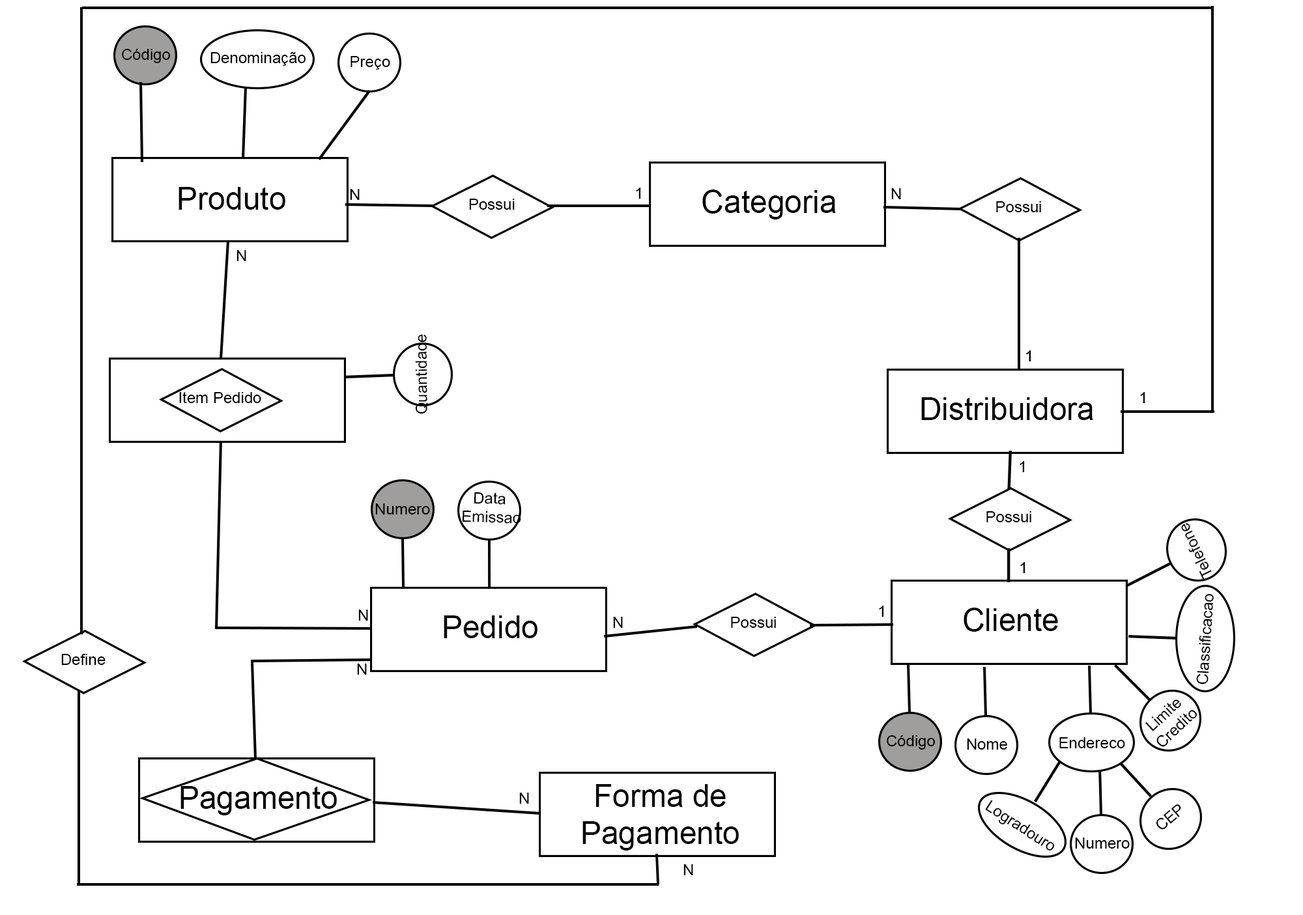
<style>
.page{position:relative;width:1303px;height:915px;background:#ffffff}
.page>*{position:absolute;margin:0}
.t1{font:15.6px "ArialMT";color:#000000}
.t2{font:31.3px "ArialMT";color:#000000}
</style>
<div class="page">
<p class="t1" style="left:122px;top:49px;width:49px;height:14px">Código</p>
<p class="t1" style="left:210px;top:52px;width:96px;height:14px">Denominação</p>
<p class="t1" style="left:350px;top:56px;width:40px;height:14px">Preço</p>
<p class="t2" style="left:178px;top:187px;width:107px;height:23px">Produto</p>
<p class="t1" style="left:350px;top:189px;width:10px;height:11px">N</p>
<p class="t1" style="left:636px;top:188px;width:5px;height:11px">1</p>
<p class="t2" style="left:702px;top:190px;width:134px;height:30px">Categoria</p>
<p class="t1" style="left:891px;top:188px;width:10px;height:11px">N</p>
<p class="t1" style="left:469px;top:199px;width:46px;height:11px">Possui</p>
<p class="t1" style="left:996px;top:201px;width:45px;height:11px">Possui</p>
<p class="t1" style="left:236px;top:250px;width:10px;height:11px">N</p>
<p class="t1" style="left:415px;top:334px;width:13px;height:80px;rotate:-91deg">Quantidade</p>
<p class="t1" style="left:1026px;top:350px;width:5px;height:12px">1</p>
<p class="t1" style="left:1026px;top:350px;width:5px;height:12px">1</p>
<p class="t1" style="left:179px;top:392px;width:82px;height:11px">Item Pedido</p>
<p class="t2" style="left:921px;top:397px;width:172px;height:23px">Distribuidora</p>
<p class="t1" style="left:1140px;top:392px;width:5px;height:11px">1</p>
<p class="t1" style="left:1019px;top:461px;width:6px;height:11px">1</p>
<p class="t1" style="left:462px;top:492px;width:59px;height:32px;text-align:center;rotate:1deg">Data <br>Emissao</p>
<p class="t1" style="left:375px;top:504px;width:55px;height:11px">Numero</p>
<p class="t1" style="left:986px;top:511px;width:45px;height:11px">Possui</p>
<p class="t1" style="left:1181px;top:523px;width:31px;height:57px;rotate:-116deg">Telefone</p>
<p class="t1" style="left:1020px;top:562px;width:5px;height:11px">1</p>
<p class="t1" style="left:1196px;top:593px;width:18px;height:92px;rotate:-86deg">Classificacao</p>
<p class="t1" style="left:879px;top:606px;width:5px;height:11px">1</p>
<p class="t1" style="left:358px;top:610px;width:10px;height:11px">N</p>
<p class="t2" style="left:444px;top:616px;width:93px;height:22px">Pedido</p>
<p class="t1" style="left:613px;top:617px;width:10px;height:11px">N</p>
<p class="t1" style="left:731px;top:617px;width:45px;height:11px">Possui</p>
<p class="t2" style="left:963px;top:608px;width:95px;height:24px">Cliente</p>
<p class="t1" style="left:61px;top:654px;width:45px;height:11px">Define</p>
<p class="t1" style="left:357px;top:664px;width:10px;height:11px">N</p>
<p class="t1" style="left:1145px;top:700px;width:52px;height:47px;text-align:center;rotate:-43deg">Limite<br>Credito</p>
<p class="t1" style="left:887px;top:735px;width:48px;height:15px">Código</p>
<p class="t1" style="left:1059px;top:737px;width:66px;height:11px">Endereco</p>
<p class="t1" style="left:967px;top:739px;width:40px;height:11px">Nome</p>
<p class="t2" style="left:582px;top:784px;width:157px;height:67px;text-align:center">Forma de Pagamento</p>
<p class="t2" style="left:180px;top:786px;width:157px;height:30px">Pagamento</p>
<p class="t1" style="left:519px;top:793px;width:10px;height:11px">N</p>
<p class="t1" style="left:985px;top:800px;width:70px;height:51px;rotate:33deg">Logradouro</p>
<p class="t1" style="left:1156px;top:805px;width:25px;height:25px;rotate:-41deg">CEP</p>
<p class="t1" style="left:1075px;top:838px;width:55px;height:11px">Numero</p>
<p class="t1" style="left:683px;top:864px;width:10px;height:12px">N</p>
</div>
